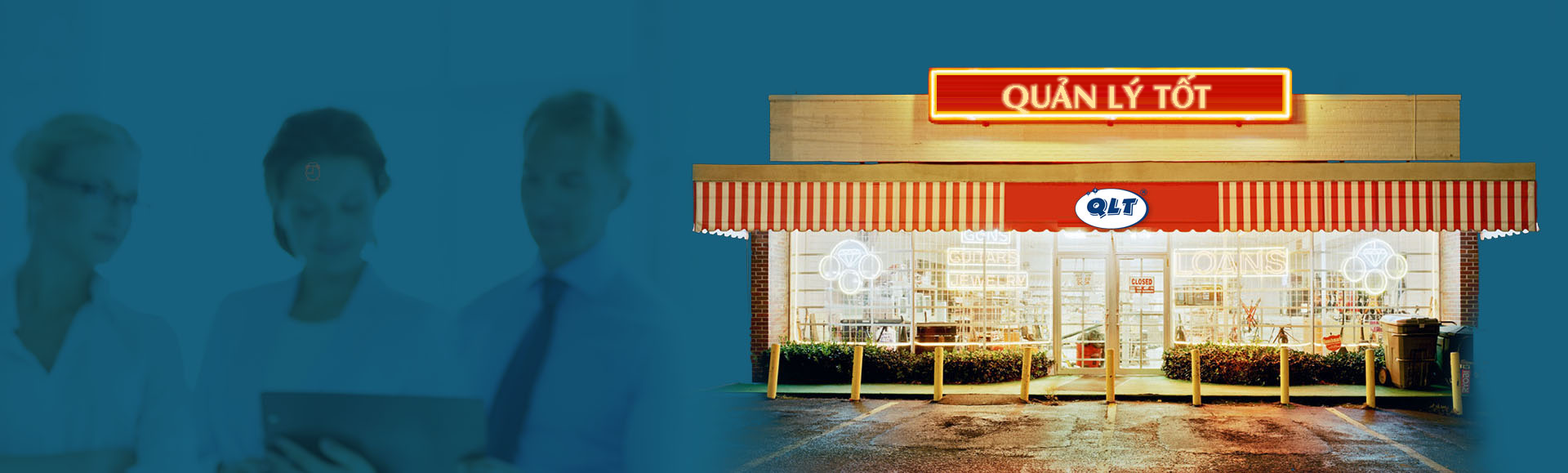
<style>
.page{position:relative;width:1568px;height:473px;background:#16607d}
.page>*{position:absolute;margin:0}
.t1{font:31.8px "VNI-Aptima-Bold";color:#ffe39a}
</style>
<div class="page">
<p class="t1" style="left:1004px;top:74px;width:206px;height:40px">QUAÛN LYÙ TOÁT</p>
</div>
